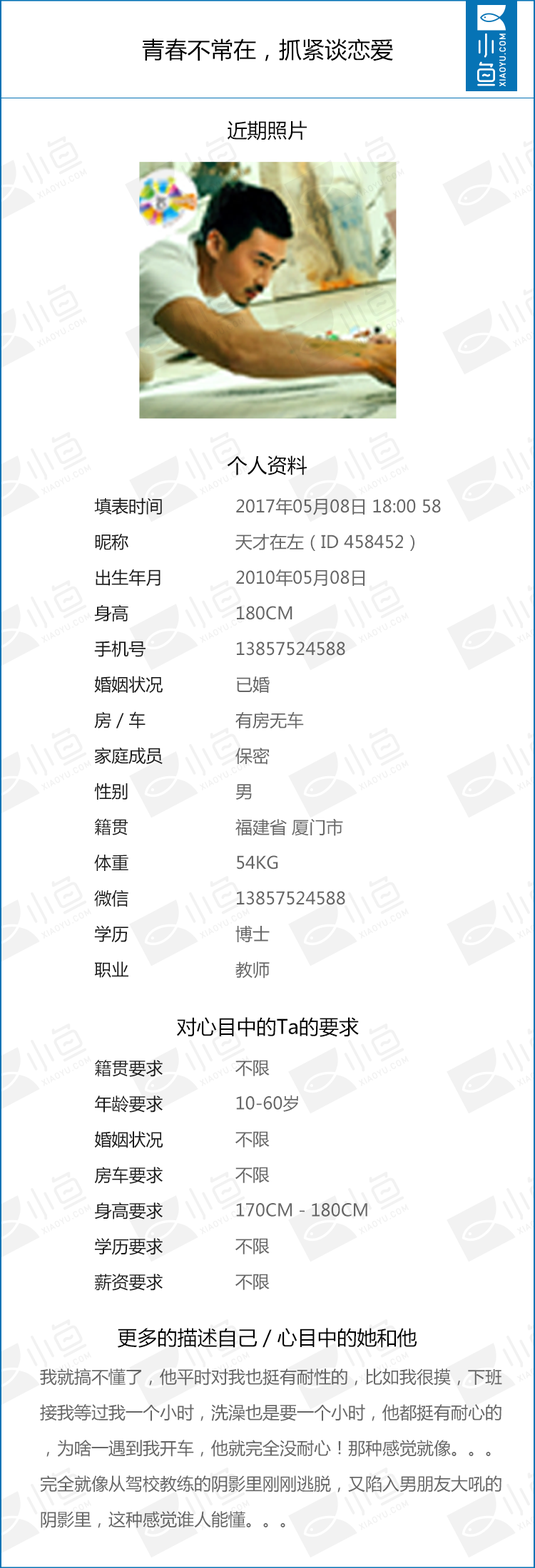
<style>
.page{position:relative;width:535px;height:1568px;background:#ffffff}
.page>*{position:absolute;margin:0}
.t1{font:22.8px "MicrosoftYaHei";color:#000000}
.t2{font:20px "MicrosoftYaHei";color:#000000}
.t3{font:17.1px/35.6px "MicrosoftYaHei";color:#1a1a1a}
.t4{font:17.1px/35.6px "MicrosoftYaHei";color:#666666}
</style>
<div class="page">
<p class="t1" style="left:142px;top:38px;width:251px;height:23px">青春不常在，抓紧谈恋爱</p>
<p class="t2" style="left:227px;top:120px;width:79px;height:20px">近期照片</p>
<p class="t2" style="left:227px;top:455px;width:79px;height:20px">个人资料</p>
<p class="t3" style="left:94px;top:497px;width:69px;height:481px">填表时间<br>昵称<br>出生年月<br>身高<br>手机号<br>婚姻状况<br>房／车<br>家庭成员<br>性别<br>籍贯<br>体重<br>微信<br>学历<br>职业</p>
<p class="t4" style="left:235px;top:498px;width:205px;height:481px">2017年05月08日 18:00 58<br>天才在左（ID 458452）<br>2010年05月08日<br>180CM<br>13857524588<br>已婚<br>有房无车<br>保密<br>男<br>福建省 厦门市<br>54KG<br>13857524588<br>博士<br>教师</p>
<p class="t2" style="left:177px;top:1017px;width:182px;height:20px">对心目中的Ta的要求</p>
<p class="t3" style="left:94px;top:1060px;width:69px;height:231px">籍贯要求<br>年龄要求<br>婚姻状况<br>房车要求<br>身高要求<br>学历要求<br>薪资要求</p>
<p class="t4" style="left:235px;top:1060px;width:132px;height:230px">不限<br>10-60岁<br>不限<br>不限<br>170CM－180CM<br>不限<br>不限</p>
<p class="t2" style="left:117px;top:1328px;width:300px;height:20px">更多的描述自己／心目中的她和他</p>
<p class="t4" style="left:40px;top:1368px;width:462px;height:160px">我就搞不懂了，他平时对我也挺有耐性的，比如我很摸，下班接我等过我一个小时，洗澡也是要一个小时，他都挺有耐心的，为啥一遇到我开车，他就完全没耐心！那种感觉就像。。。完全就像从驾校教练的阴影里刚刚逃脱，又陷入男朋友大吼的阴影里，这种感觉谁人能懂。。。</p>
</div>
